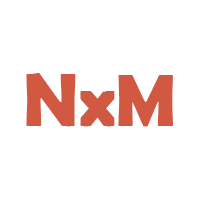
<style>
.page{position:relative;width:200px;height:200px;background:#ffffff}
.page>*{position:absolute;margin:0}
.t1{font:75px "BerlinSansFBDemi-Bold";color:#d15941}
</style>
<div class="page">
<p class="t1" style="left:26px;top:73px;width:147px;height:54px">NxM</p>
</div>
